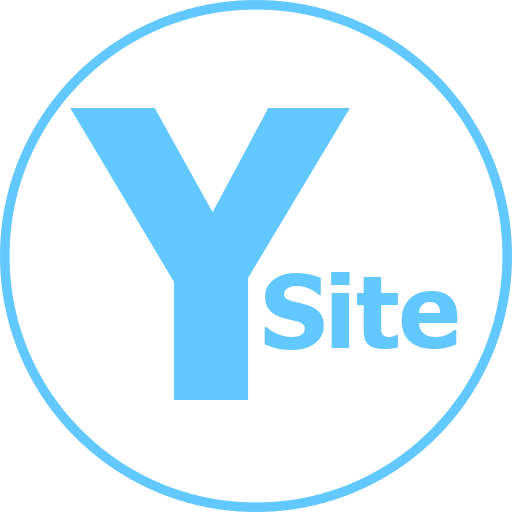
<style>
.page{position:relative;width:512px;height:512px;background:#ffffff}
.page>*{position:absolute;margin:0}
.t1{font:401.6px "Tahoma-Bold";color:#61c9ff}
.t2{font:101.4px "Tahoma-Bold";color:#61c9ff}
</style>
<div class="page">
<p class="t1" style="left:70px;top:107px;width:280px;height:293px">Y</p>
<p class="t2" style="left:264px;top:272px;width:194px;height:78px">Site</p>
</div>
